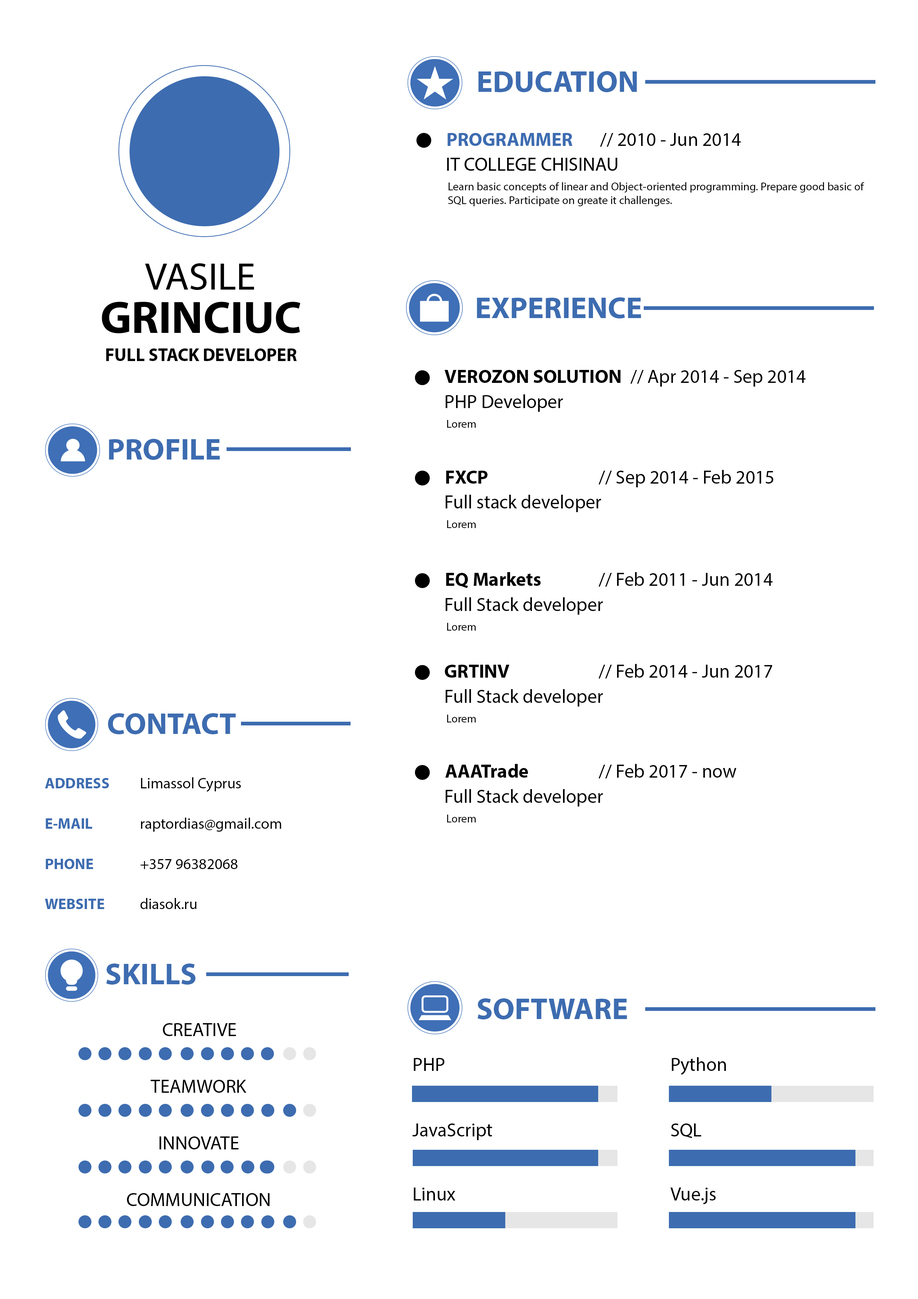
<style>
.page{position:relative;width:918px;height:1299px;background:#ffffff}
.page>*{position:absolute;margin:0}
.t1{font:30.5px "MyriadPro-Bold";color:#3d6cb0}
.t2{font:19px "MyriadPro-Bold";color:#3d6cb0}
.t3{font:19px "MyriadPro-Regular";color:#020202}
.t4{font:19px "MyriadPro-Regular";color:#000000}
.t5{font:11.4px "MyriadPro-Regular";color:#000000}
.t6{font:38.7px "MyriadPro-Regular";color:#000000}
.t7{font:45.7px "MyriadPro-Bold";color:#000000}
.t8{font:18.5px "MyriadPro-Bold";color:#000000;scale:0.96 1}
.t9{font:19px "MyriadPro-Bold";color:#000000}
.t10{font:15.2px "MyriadPro-Bold";color:#3d6cb0}
.t11{font:15.2px "MyriadPro-Regular";color:#000000}
</style>
<div class="page">
<p class="t1" style="left:478px;top:71px;width:159px;height:21px">EDUCATION</p>
<p class="t2" style="left:448px;top:133px;width:125px;height:13px">PROGRAMMER</p>
<p class="t3" style="left:600px;top:133px;width:141px;height:14px">// 2010 - Jun 2014</p>
<p class="t4" style="left:447px;top:158px;width:171px;height:13px">IT COLLEGE CHISINAU</p>
<p class="t5" style="left:448px;top:182px;width:416px;height:24px">Learn basic concepts of linear and Object-oriented programming. Prepare good basic of SQL queries. Participate on greate it challenges.</p>
<p class="t6" style="left:145px;top:263px;width:109px;height:27px">VASILE</p>
<p class="t7" style="left:102px;top:302px;width:199px;height:32px">GRINCIUC</p>
<p class="t1" style="left:477px;top:297px;width:164px;height:21px">EXPERIENCE</p>
<p class="t8" style="left:106px;top:348px;width:191px;height:13px">FULL STACK DEVELOPER</p>
<p class="t9" style="left:445px;top:370px;width:176px;height:13px">VEROZON SOLUTION</p>
<p class="t3" style="left:630px;top:370px;width:176px;height:17px">// Apr 2014 - Sep 2014</p>
<p class="t4" style="left:446px;top:394px;width:117px;height:18px">PHP Developer</p>
<p class="t5" style="left:447px;top:420px;width:29px;height:8px">Lorem</p>
<p class="t1" style="left:109px;top:439px;width:111px;height:21px">PROFILE</p>
<p class="t9" style="left:446px;top:471px;width:42px;height:13px">FXCP</p>
<p class="t3" style="left:599px;top:470px;width:174px;height:17px">// Sep 2014 - Feb 2015</p>
<p class="t4" style="left:446px;top:495px;width:155px;height:17px">Full stack developer</p>
<p class="t5" style="left:447px;top:520px;width:29px;height:8px">Lorem</p>
<p class="t9" style="left:446px;top:572px;width:95px;height:16px">EQ Markets</p>
<p class="t3" style="left:599px;top:572px;width:174px;height:15px">// Feb 2011 - Jun 2014</p>
<p class="t4" style="left:446px;top:597px;width:157px;height:18px">Full Stack developer</p>
<p class="t5" style="left:447px;top:623px;width:29px;height:7px">Lorem</p>
<p class="t9" style="left:445px;top:665px;width:64px;height:13px">GRTINV</p>
<p class="t3" style="left:599px;top:664px;width:173px;height:15px">// Feb 2014 - Jun 2017</p>
<p class="t4" style="left:446px;top:689px;width:157px;height:17px">Full Stack developer</p>
<p class="t1" style="left:108px;top:713px;width:128px;height:21px">CONTACT</p>
<p class="t5" style="left:447px;top:715px;width:29px;height:7px">Lorem</p>
<p class="t9" style="left:445px;top:764px;width:83px;height:13px">AAATrade</p>
<p class="t3" style="left:599px;top:764px;width:138px;height:15px">// Feb 2017 - now</p>
<p class="t10" style="left:45px;top:778px;width:64px;height:10px">ADDRESS</p>
<p class="t11" style="left:141px;top:777px;width:100px;height:15px">Limassol Cyprus</p>
<p class="t4" style="left:446px;top:789px;width:157px;height:17px">Full Stack developer</p>
<p class="t10" style="left:46px;top:818px;width:46px;height:11px">E-MAIL</p>
<p class="t11" style="left:141px;top:817px;width:140px;height:15px">raptordias@gmail.com</p>
<p class="t5" style="left:447px;top:814px;width:29px;height:8px">Lorem</p>
<p class="t10" style="left:46px;top:859px;width:47px;height:10px">PHONE</p>
<p class="t11" style="left:140px;top:859px;width:98px;height:10px">+357 96382068</p>
<p class="t10" style="left:45px;top:899px;width:59px;height:10px">WEBSITE</p>
<p class="t11" style="left:140px;top:898px;width:57px;height:11px">diasok.ru</p>
<p class="t1" style="left:106px;top:963px;width:89px;height:21px">SKILLS</p>
<p class="t1" style="left:478px;top:998px;width:149px;height:21px">SOFTWARE</p>
<p class="t4" style="left:163px;top:1023px;width:73px;height:13px">CREATIVE</p>
<p class="t4" style="left:414px;top:1058px;width:31px;height:13px">PHP</p>
<p class="t4" style="left:672px;top:1057px;width:54px;height:18px">Python</p>
<p class="t4" style="left:151px;top:1080px;width:96px;height:13px">TEAMWORK</p>
<p class="t4" style="left:412px;top:1123px;width:80px;height:17px">JavaScript</p>
<p class="t4" style="left:671px;top:1123px;width:31px;height:15px">SQL</p>
<p class="t4" style="left:160px;top:1136px;width:79px;height:13px">INNOVATE</p>
<p class="t4" style="left:127px;top:1193px;width:143px;height:13px">COMMUNICATION</p>
<p class="t4" style="left:414px;top:1187px;width:41px;height:13px">Linux</p>
<p class="t4" style="left:670px;top:1187px;width:46px;height:17px">Vue.js</p>
</div>
